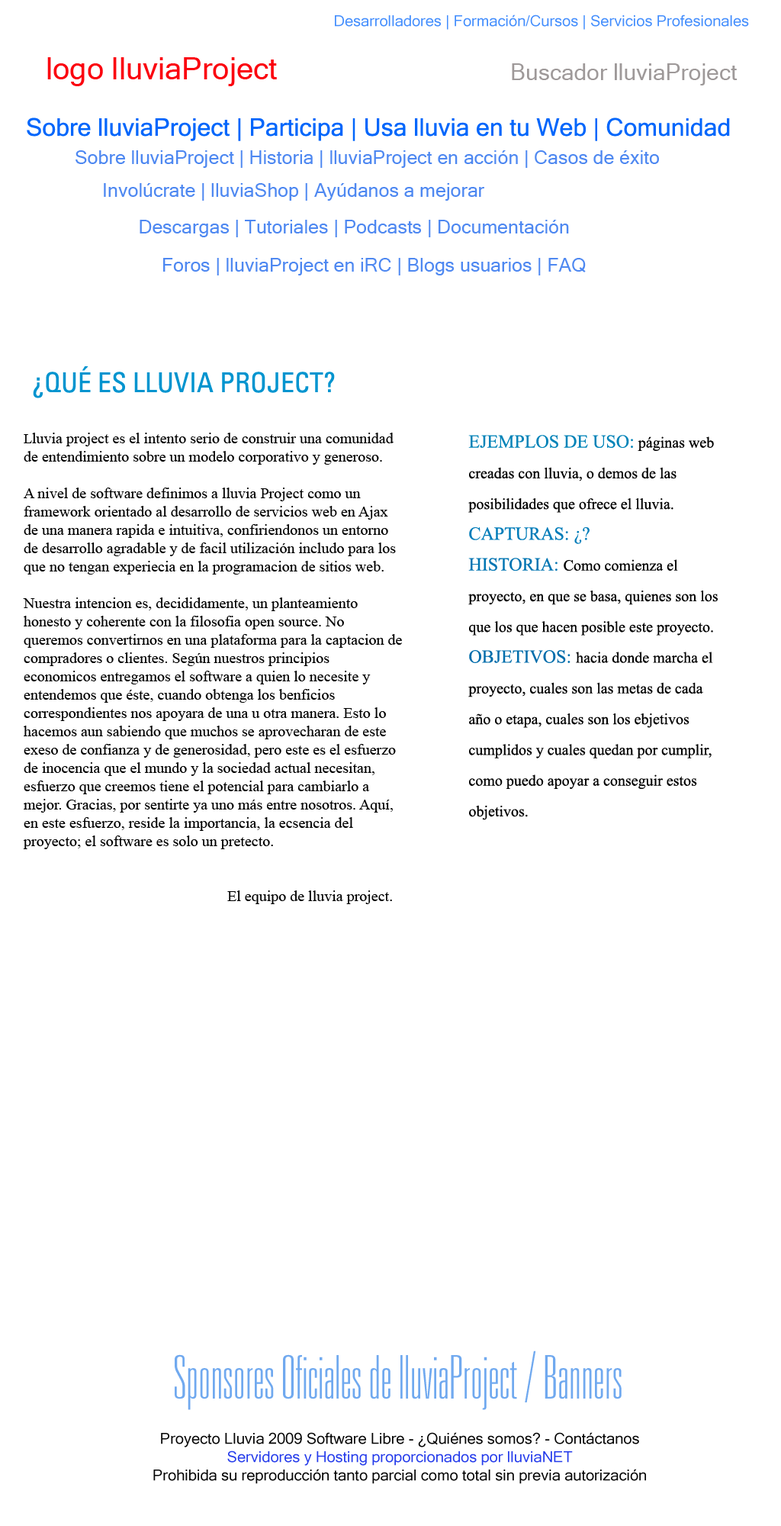
<style>
.page{position:relative;width:781px;height:1526px;background:#ffffff}
.page>*{position:absolute;margin:0}
.t1{font:15.3px "MicrosoftSansSerif";color:#428dfd}
.t2{font:30.5px "MicrosoftSansSerif";color:#fb020e}
.t3{font:22.9px "MicrosoftSansSerif";color:#9e9999}
.t4{font:24.4px "MicrosoftSansSerif";color:#0266fb}
.t5{font:19.1px "MicrosoftSansSerif";color:#4e88f1}
.t6{font:27.5px "Univers-Condensed";color:#0094cf}
.t7{font:15.3px "TimesNewRomanPSMT";color:#000000}
.t8{font:13.7px "TimesNewRomanPSMT";color:#000000}
.t9{font:15.3px/30.7px "TimesNewRomanPSMT";color:#000000}
.t10{font:18.3px/30.7px "TimesNewRomanPSMT";color:#0083b8}
.t11{font:18.3px/30.7px "TimesNewRomanPSMT";color:#007cb9}
.t12{font:18.3px/30.7px "TimesNewRomanPSMT";color:#0075b2}
.t13{font:18.3px/30.7px "TimesNewRomanPSMT";color:#006dab}
.t14{font:60.3px "Univers-ThinUltraCondensed";color:#70a9ef}
.t15{font:15.3px "MicrosoftSansSerif";color:#040404}
.t16{font:15.3px "MicrosoftSansSerif";color:#253ceb}
</style>
<div class="page">
<p class="t1" style="left:335px;top:14px;width:414px;height:16px">Desarrolladores | Formación/Cursos | Servicios Profesionales</p>
<p class="t2" style="left:47px;top:57px;width:230px;height:29px">logo lluviaProject</p>
<p class="t3" style="left:512px;top:63px;width:226px;height:22px">Buscador lluviaProject</p>
<p class="t4" style="left:27px;top:118px;width:703px;height:23px">Sobre lluviaProject | Participa | Usa lluvia en tu Web | Comunidad</p>
<p class="t5" style="left:76px;top:150px;width:583px;height:18px">Sobre lluviaProject | Historia | lluviaProject en acción | Casos de éxito</p>
<p class="t5" style="left:104px;top:183px;width:381px;height:18px">Involúcrate | lluviaShop | Ayúdanos a mejorar</p>
<p class="t5" style="left:140px;top:220px;width:429px;height:17px">Descargas | Tutoriales | Podcasts | Documentación</p>
<p class="t5" style="left:163px;top:258px;width:423px;height:17px">Foros | lluviaProject en iRC | Blogs usuarios | FAQ</p>
<p class="t6" style="left:33px;top:366px;width:302px;height:32px">¿QUÉ ES LLUVIA PROJECT?</p>
<p class="t7" style="left:23px;top:433px;width:379px;height:471px"><span class="t8">L</span>luvia project es el intento serio de construir una comunidad de entendimiento sobre un modelo corporativo y generoso.<br><br>A nivel de software definimos a lluvia Project como un framework orientado al desarrollo de servicios web en Ajax de una manera rapida e intuitiva, confiriendonos un entorno de desarrollo agradable y de facil utilización includo para los que no tengan experiecia en la programacion de sitios web.<br><br>Nuestra intencion es, decididamente, un planteamiento honesto y coherente con la filosofia open source. No queremos convertirnos en una plataforma para la captacion de compradores o clientes. Según nuestros principios economicos entregamos el software a quien lo necesite y entendemos que éste, cuando obtenga los benficios correspondientes nos apoyara de una u otra manera. Esto lo hacemos aun sabiendo que muchos se aprovecharan de este exeso de confianza y de generosidad, pero este es el esfuerzo de inocencia que el mundo y la sociedad actual necesitan, esfuerzo que creemos tiene el potencial para cambiarlo a mejor. Gracias, por sentirte ya uno más entre nosotros. Aquí, en este esfuerzo, reside la importancia, la ecsencia del proyecto; el software es solo un pretecto.<br><br><br>                                              El equipo de lluvia project.</p>
<p class="t9" style="left:469px;top:435px;width:249px;height:385px"><span class="t10">EJEMPLOS DE USO: </span>páginas web creadas con lluvia, o demos de las posibilidades que ofrece el lluvia.<br><span class="t11">CAPTURAS: ¿?<br></span><span class="t12">HISTORIA: </span>Como comienza el proyecto, en que se basa, quienes son los que los que hacen posible este proyecto.<br><span class="t13">OBJETIVOS: </span>hacia donde marcha el proyecto, cuales son las metas de cada año o etapa, cuales son los ebjetivos cumplidos y cuales quedan por cumplir, como puedo apoyar a conseguir estos objetivos.</p>
<p class="t14" style="left:175px;top:1351px;width:447px;height:59px">Sponsores Oficiales de lluviaProject / Banners</p>
<p class="t15" style="left:153px;top:1432px;width:493px;height:52px;text-align:center">Proyecto Lluvia 2009 Software Libre - ¿Quiénes somos? - Contáctanos<br><span class="t16">Servidores y Hosting proporcionados por lluviaNET<br></span>Prohibida su reproducción tanto parcial como total sin previa autorización</p>
</div>
